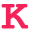
<style>
.page{position:relative;width:32px;height:32px;background:#ffffff}
.page>*{position:absolute;margin:0}
.t1{font:42px "Courier";letter-spacing:0.075em;color:#f4235a;font-weight:bold;scale:1.12 1}
</style>
<div class="page">
<p class="t1" style="left:1px;top:4px;width:28px;height:25px">K</p>
</div>
